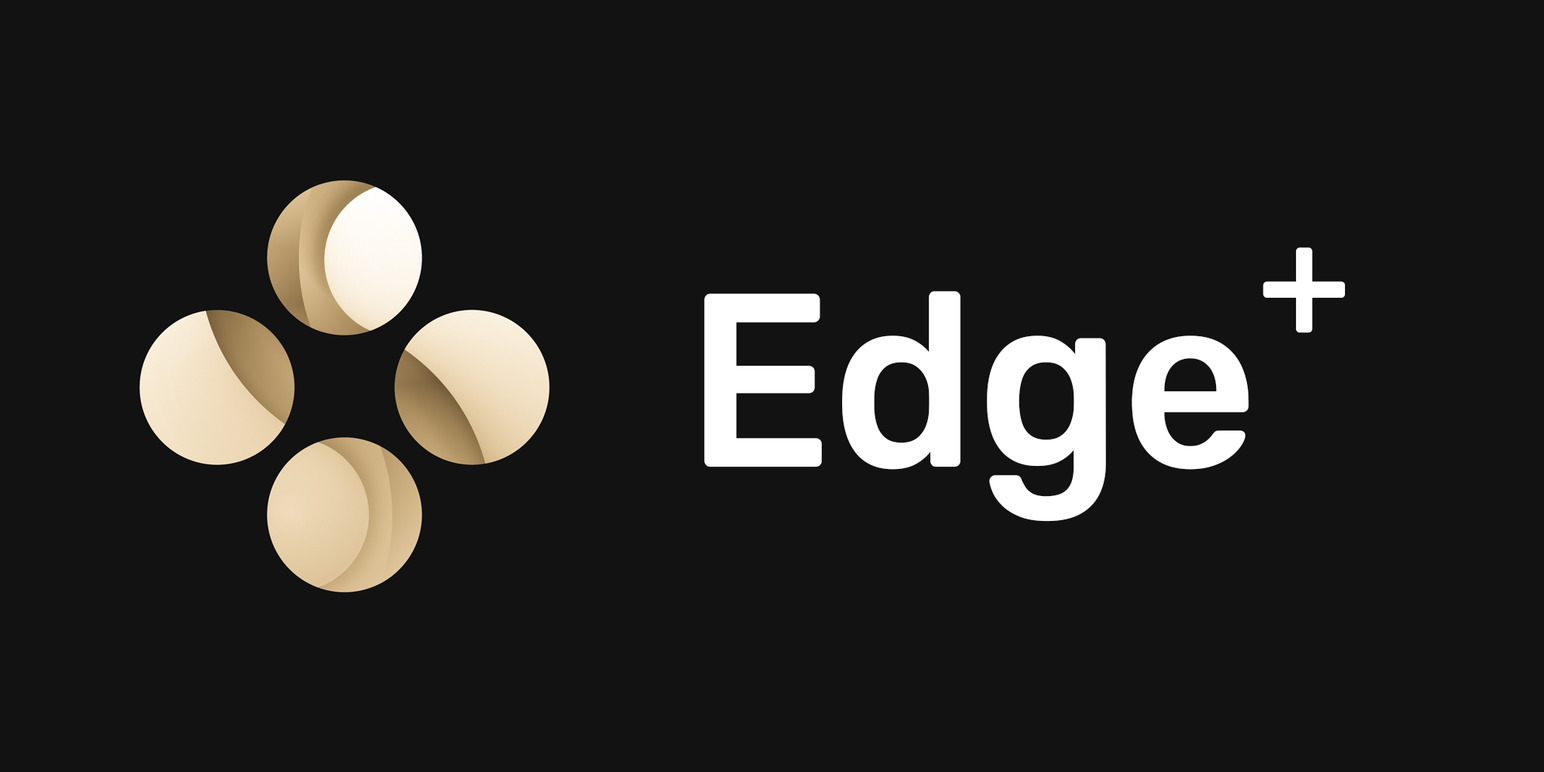
<style>
.page{position:relative;width:1544px;height:772px;background:#121212}
.page>*{position:absolute;margin:0}
.t1{font:158.9px "RubikRoman-Medium";color:#ffffff;scale:0.96 1}
.t2{font:247px "RubikRoman-Medium";color:#ffffff;scale:0.96 1}
</style>
<div class="page">
<p class="t1" style="left:1263px;top:247px;width:82px;height:86px">+</p>
<p class="t2" style="left:704px;top:291px;width:545px;height:231px">Edge</p>
</div>
